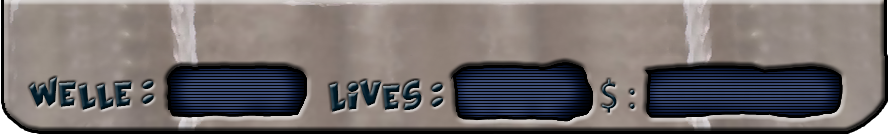
<style>
.page{position:relative;width:889px;height:135px}
.page>*{position:absolute;margin:0}
.t1{font:20px "KraashBlack"}
.t2{font:40px "MyriadPro-Regular"}
</style>
<div class="page">
<p class="t1" style="left:29px;top:77px;width:125px;height:33px">welle :</p>
<p class="t1" style="left:329px;top:80px;width:115px;height:32px">Lives :</p>
<p class="t2" style="left:601px;top:79px;width:34px;height:34px">$ :</p>
</div>
